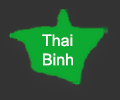
<style>
.page{position:relative;width:120px;height:100px;background:#333333}
.page>*{position:absolute;margin:0}
.t1{font:16px "ArialMT";color:#ffffff}
</style>
<div class="page">
<p class="t1" style="left:42px;top:34px;width:31px;height:32px">Thai <br>Binh</p>
</div>
